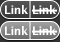
<style>
.page{position:relative;width:60px;height:42px}
.page>*{position:absolute;margin:0}
.t1{font:11.5px "LucidaGrande-Bold";letter-spacing:-0.025em;color:#ffffff}
</style>
<div class="page">
<p class="t1" style="left:5px;top:5px;width:23px;height:9px">Link</p>
<p class="t1" style="left:33px;top:5px;width:23px;height:9px">Link</p>
<p class="t1" style="left:5px;top:26px;width:23px;height:9px">Link</p>
<p class="t1" style="left:33px;top:26px;width:23px;height:9px">Link</p>
</div>
